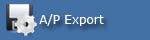
<style>
.page{position:relative;width:150px;height:40px;background:#4371a5}
.page>*{position:absolute;margin:0}
.t1{font:12px "Verdana";color:#ffffff}
</style>
<div class="page">
<p class="t1" style="left:39px;top:14px;width:65px;height:12px">A/P Export</p>
</div>
